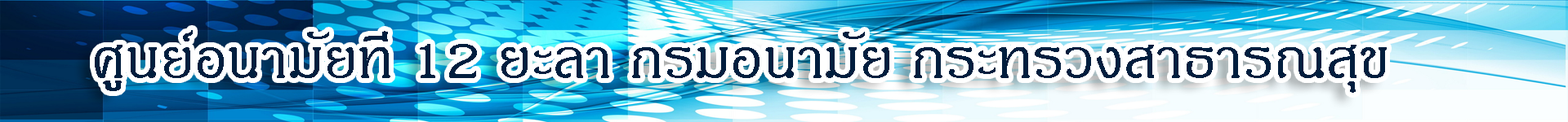
<style>
.page{position:relative;width:1568px;height:122px}
.page>*{position:absolute;margin:0}
.t1{font:77.6px "JasmineUPC";color:#001e3e}
</style>
<div class="page">
<p class="t1" style="left:95px;top:30px;width:1292px;height:63px">ศูนย์อนามัยที่ 12 ยะลา กรมอนามัย กระทรวงสาธารณสุข</p>
</div>
